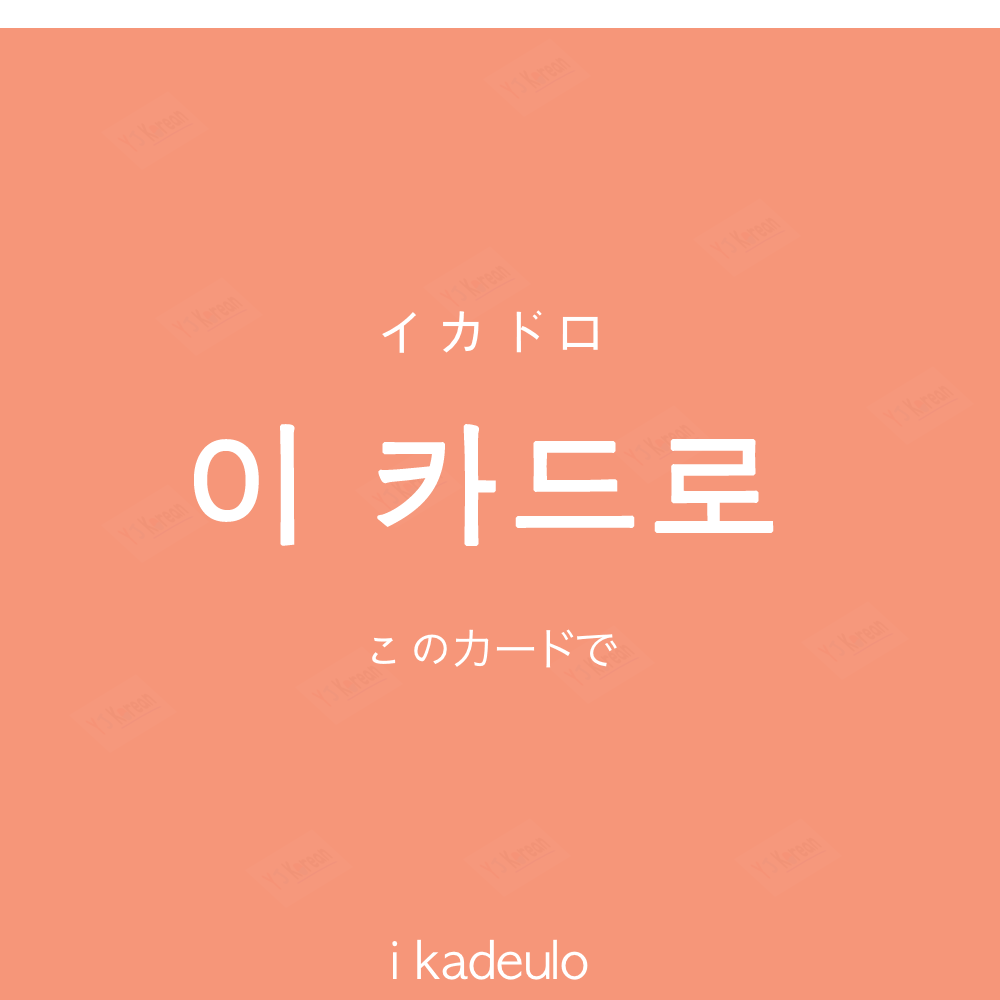
<style>
.page{position:relative;width:1000px;height:1000px;background:#f69679}
.page>*{position:absolute;margin:0}
.t1{font:60px "AppleGothic";color:#ffffff}
.t2{font:130px "AppleGothic";letter-spacing:0.04em;color:#ffffff;font-weight:bold}
.t3{font:45px "HiraKakuProN-W3";color:#ffffff}
.t4{font:45px "AppleGothic";color:#ffffff}
.t5{font:50px "AppleGothic";color:#ffffff}
</style>
<div class="page">
<p class="t1" style="left:382px;top:310px;width:216px;height:43px">イカドロ</p>
<p class="t2" style="left:194px;top:424px;width:580px;height:122px">이 카드로</p>
<p class="t3" style="left:372px;top:629px;width:245px;height:39px"><span class="t4">この</span>カードで</p>
<p class="t5" style="left:392px;top:939px;width:196px;height:41px">i kadeulo</p>
</div>
